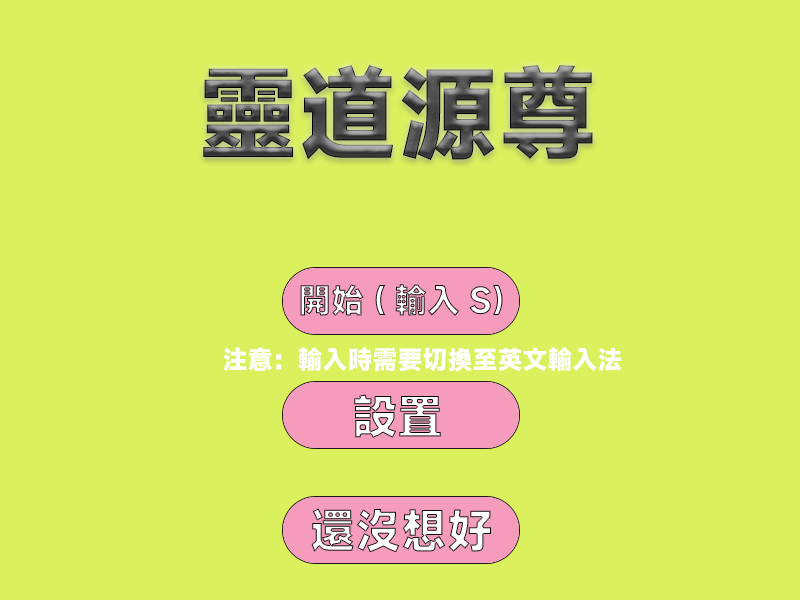
<style>
.page{position:relative;width:800px;height:600px;background:#daf05d}
.page>*{position:absolute;margin:0}
.t1{font:100px "MiSans-Heavy"}
.t2{font:33.3px "MiSans-Heavy"}
.t3{font:25px "MiSans-Heavy";color:#ffffff}
</style>
<div class="page">
<p class="t1" style="left:203px;top:65px;width:390px;height:95px">靈道源尊</p>
<p class="t2" style="left:300px;top:284px;width:203px;height:32px">開始(輸入S)</p>
<p class="t3" style="left:223px;top:347px;width:399px;height:25px">注意：輸入時需要切換至英文輸入法</p>
</div>
